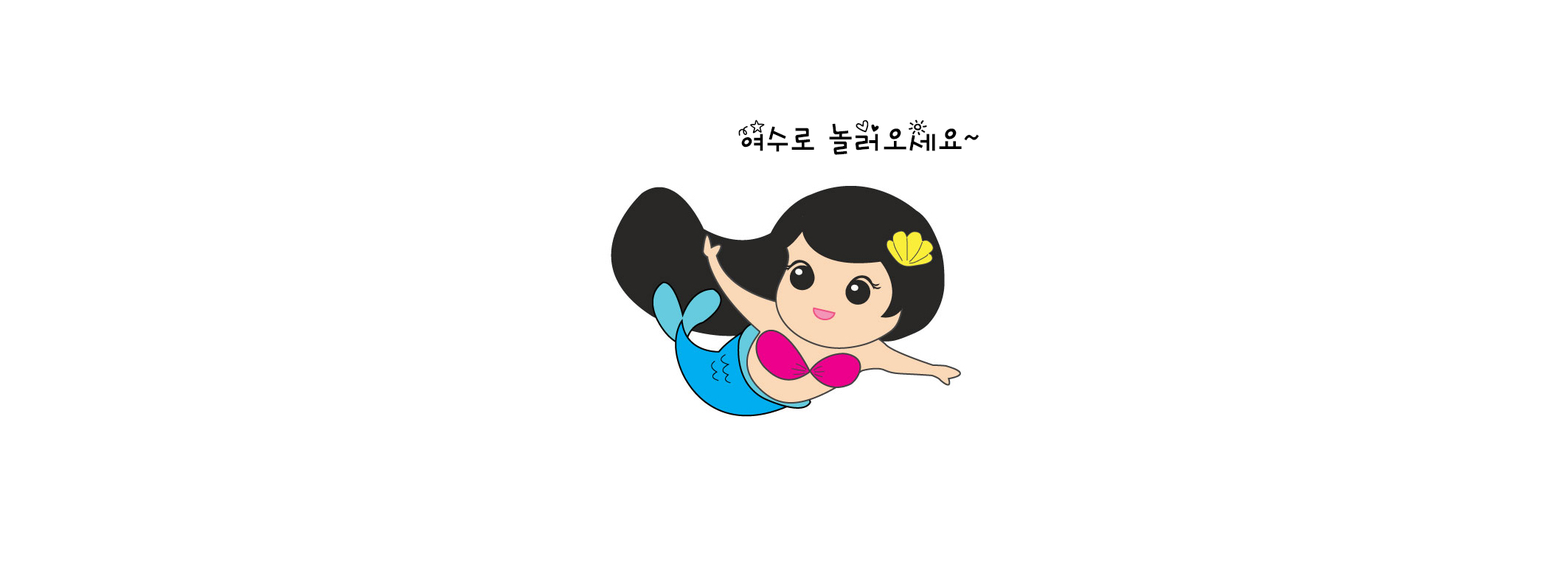
<style>
.page{position:relative;width:1568px;height:588px;background:#ffffff}
.page>*{position:absolute;margin:0}
.t1{font:35.4px "KoreanKMCS-R";color:#000000}
</style>
<div class="page">
<p class="t1" style="left:738px;top:119px;width:241px;height:36px">여수로 놀러오세요~</p>
</div>
